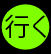
<style>
.page{position:relative;width:51px;height:54px;background:#7fff00}
.page>*{position:absolute;margin:0}
.t1{font:25px "KozGoPr6N-Regular";color:#000000}
</style>
<div class="page">
<p class="t1" style="left:5px;top:14px;width:42px;height:24px">行く</p>
</div>
